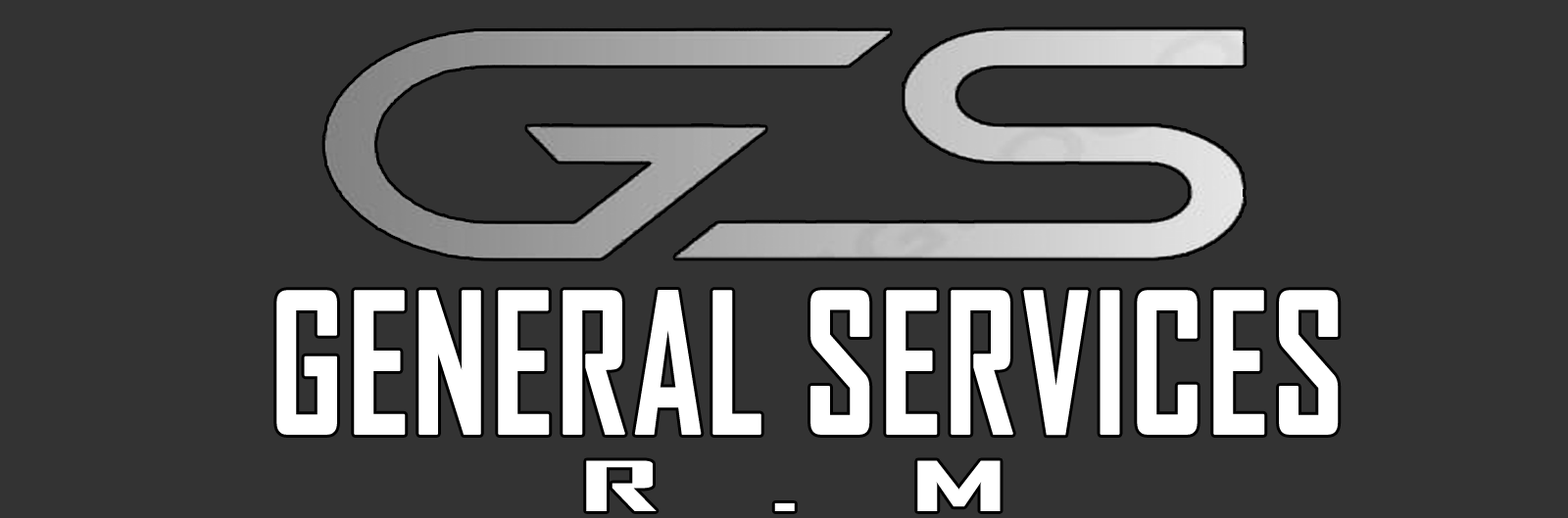
<style>
.page{position:relative;width:1568px;height:518px;background:#333333}
.page>*{position:absolute;margin:0}
.t1{font:187px "AgencyFB-Bold";color:#ffffff;font-weight:bold;scale:0.83 1}
.t2{font:66.1px "AgencyFB-Bold";letter-spacing:0.2em;color:#ffffff;scale:2.69 1}
</style>
<div class="page">
<p class="t1" style="left:276px;top:290px;width:1063px;height:146px">GENERAL SERVICES</p>
<p class="t2" style="left:586px;top:461px;width:415px;height:51px">R . M</p>
</div>
